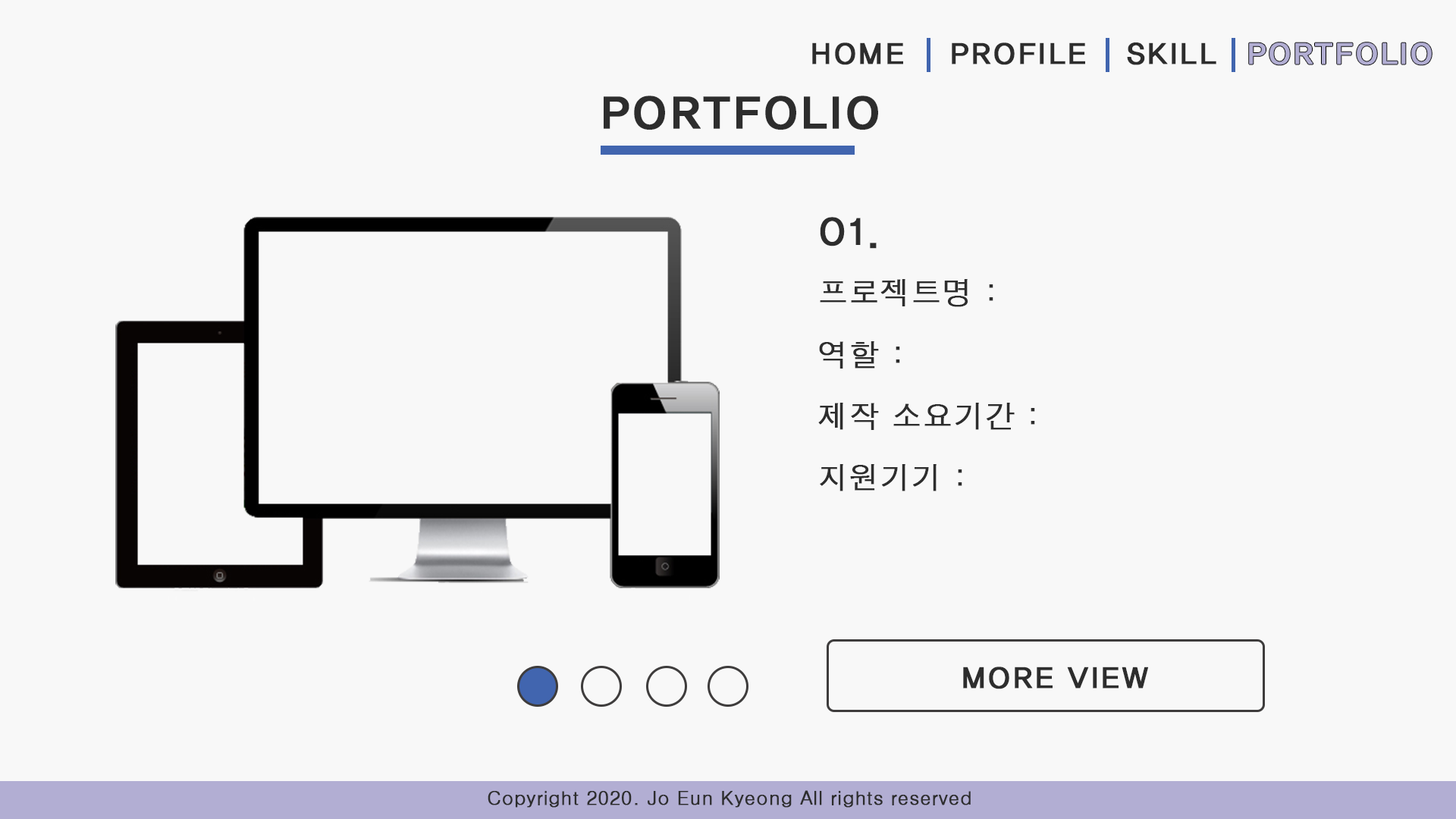
<style>
.page{position:relative;width:1456px;height:819px;background:#f8f8f8}
.page>*{position:absolute;margin:0}
.t1{font:30.3px "HaanYGodic23";color:#2d2d2d;font-weight:bold}
.t2{font:45.5px "HaanYGodic24";color:#2d2d2d;font-weight:bold}
.t3{font:37.9px "HaanYGodic23";color:#2d2d2d;font-weight:bold}
.t4{font:30.3px "H2gtrM";color:#2d2d2d;font-weight:bold}
.t5{font:19px "H2gtrM";color:#2d2d2d;font-weight:bold}
</style>
<div class="page">
<p class="t1" style="left:812px;top:42px;width:91px;height:23px">HOME</p>
<p class="t1" style="left:952px;top:42px;width:133px;height:23px">PROFILE</p>
<p class="t1" style="left:1127px;top:42px;width:89px;height:23px">SKILL</p>
<p class="t2" style="left:604px;top:96px;width:274px;height:34px">PORTFOLIO</p>
<p class="t3" style="left:820px;top:217px;width:57px;height:32px">01.</p>
<p class="t4" style="left:820px;top:279px;width:173px;height:28px">프로젝트명 :</p>
<p class="t4" style="left:819px;top:341px;width:81px;height:28px">역할 :</p>
<p class="t4" style="left:818px;top:403px;width:217px;height:27px">제작 소요기간 :</p>
<p class="t4" style="left:820px;top:464px;width:142px;height:27px">지원기기 :</p>
<p class="t1" style="left:963px;top:667px;width:185px;height:22px">MORE VIEW</p>
<p class="t5" style="left:488px;top:790px;width:483px;height:18px">Copyright 2020. Jo Eun Kyeong All rights reserved</p>
</div>
